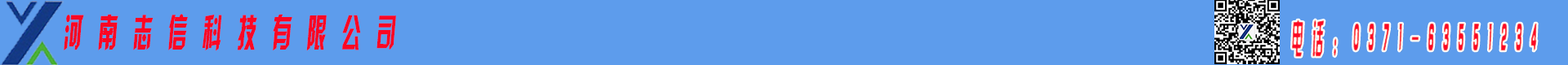
<style>
.page{position:relative;width:1568px;height:65px;background:#5d9cec}
.page>*{position:absolute;margin:0}
.t1{font:38.6px "HYk2gj";letter-spacing:0.83em;color:#fc0623;font-style:italic;scale:0.49 1}
.t2{font:40.2px "HYk2gj";letter-spacing:0.83em;font-style:italic;scale:0.28 1}
</style>
<div class="page">
<p class="t1" style="left:64px;top:14px;width:332px;height:37px">河南志信科技有限公司</p>
<p class="t2" style="left:1292px;top:20px;width:245px;height:37px">电话：0371-63551234</p>
</div>
